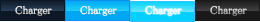
<style>
.page{position:relative;width:260px;height:22px}
.page>*{position:absolute;margin:0}
.t1{font:11px "MS-PMincho";color:#e4e4e4}
.t2{font:11px "MS-PMincho";color:#ffffff}
.t3{font:11px "MS-PMincho"}
</style>
<div class="page">
<p class="t1" style="left:15px;top:6px;width:37px;height:10px">Charger</p>
<p class="t2" style="left:80px;top:6px;width:37px;height:10px">Charger</p>
<p class="t2" style="left:145px;top:6px;width:37px;height:10px">Charger</p>
<p class="t3" style="left:210px;top:6px;width:37px;height:10px">Charger</p>
</div>
